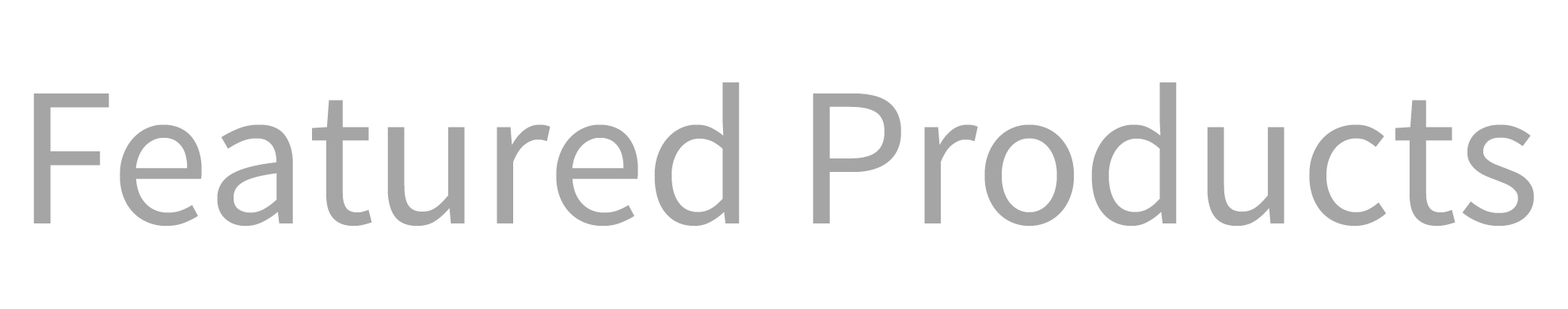
<style>
.page{position:relative;width:1568px;height:309px;background:#ffffff}
.page>*{position:absolute;margin:0}
.t1{font:198px "SourceSansPro-Regular";color:#a5a5a5}
</style>
<div class="page">
<p class="t1" style="left:33px;top:82px;width:1501px;height:144px">Featured Products</p>
</div>
